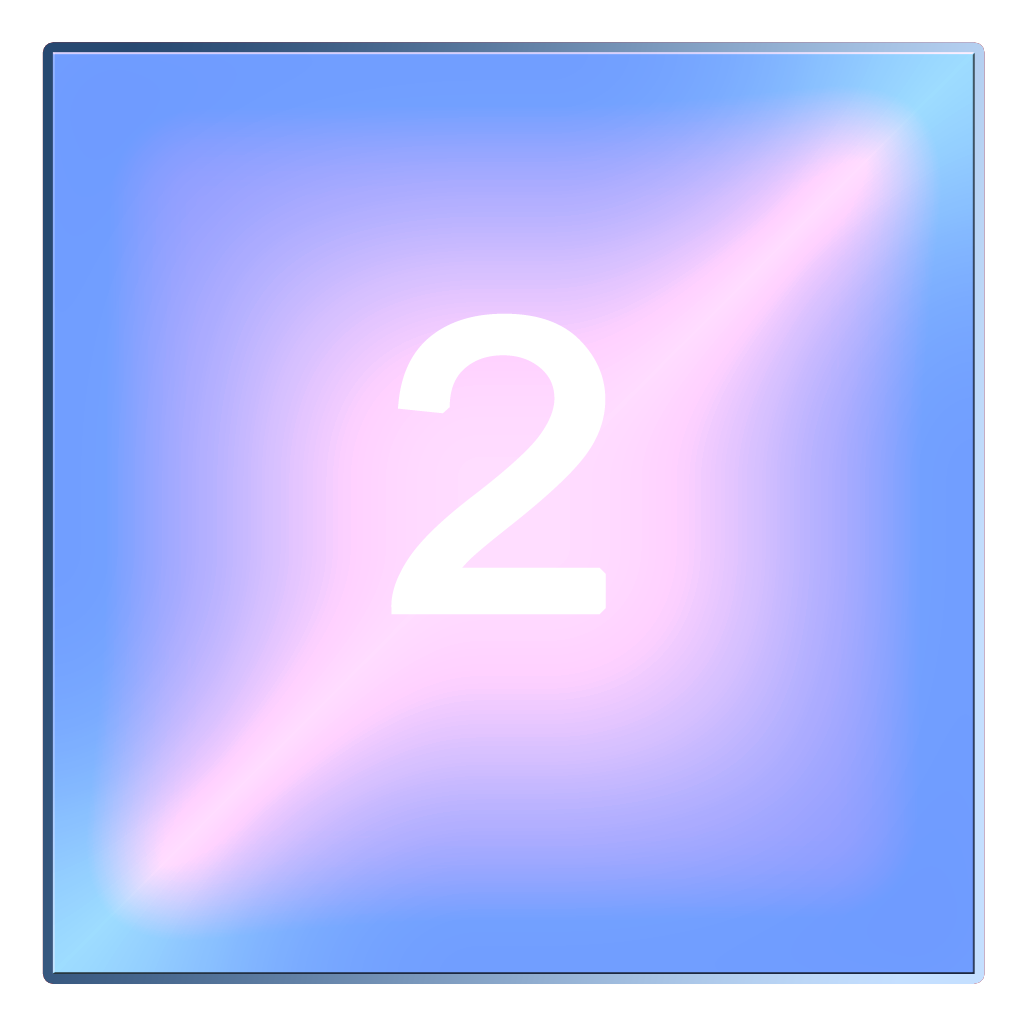
<style>
.page{position:relative;width:1024px;height:1024px}
.page>*{position:absolute;margin:0}
.t1{font:400px "ArialNarrow";color:#ffffff;font-weight:bold;scale:1.3 1}
</style>
<div class="page">
<p class="t1" style="left:391px;top:313px;width:215px;height:302px">2</p>
</div>
